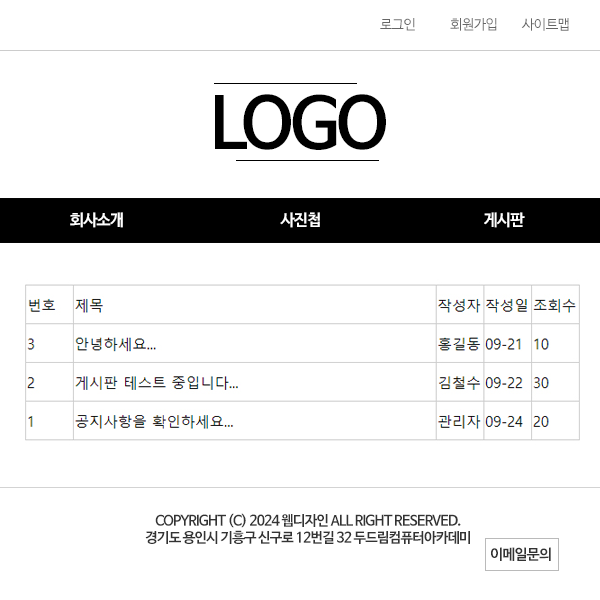
<style>
.page{position:relative;width:600px;height:600px;background:#ffffff}
.page>*{position:absolute;margin:0}
.t1{font:14px "NanumBarunGothic";letter-spacing:-0.05em;color:#666666}
.t2{font:70px "NanumBarunGothicBold";letter-spacing:-0.05em;color:#000000}
.t3{font:16px "NanumBarunGothicBold";letter-spacing:-0.05em;color:#ffffff}
.t4{font:14px "NanumBarunGothicBold";letter-spacing:-0.05em;color:#333333}
.t5{font:14.5px "NanumBarunGothicBold";letter-spacing:-0.05em;color:#333333}
</style>
<div class="page">
<p class="t1" style="left:380px;top:18px;width:35px;height:13px">로그인</p>
<p class="t1" style="left:450px;top:18px;width:47px;height:13px">회원가입</p>
<p class="t1" style="left:521px;top:18px;width:48px;height:13px">사이트맵</p>
<p class="t2" style="left:215px;top:94px;width:171px;height:56px">LOGO</p>
<p class="t3" style="left:70px;top:212px;width:53px;height:16px">회사소개</p>
<p class="t3" style="left:280px;top:212px;width:40px;height:16px">사진첩</p>
<p class="t3" style="left:484px;top:212px;width:41px;height:16px">게시판</p>
<p class="t4" style="left:145px;top:513px;width:325px;height:31px;text-align:center">COPYRIGHT (C) 2024 웹디자인 ALL RIGHT RESERVED.<br>경기도 용인시 기흥구 신구로 12번길 32 두드림컴퓨터아카데미</p>
<p class="t5" style="left:491px;top:547px;width:60px;height:14px">이메일문의</p>
</div>
